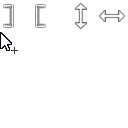
<style>
.page{position:relative;width:128px;height:128px;background:#ffffff}
.page>*{position:absolute;margin:0}
.t1{font:12px "MyriadPro-Regular";color:#3b3b3b}
</style>
<div class="page">
<p class="t1" style="left:11px;top:47px;width:7px;height:7px">+</p>
</div>
